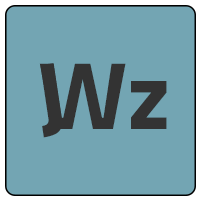
<style>
.page{position:relative;width:200px;height:200px;background:#73a5b3}
.page>*{position:absolute;margin:0}
.t1{font:96px "TitilliumWeb-Bold";color:#333333}
</style>
<div class="page">
<p class="t1" style="left:39px;top:63px;width:128px;height:66px">Wz</p>
<p class="t1" style="left:40px;top:63px;width:22px;height:75px;rotate:-8deg">J</p>
</div>
